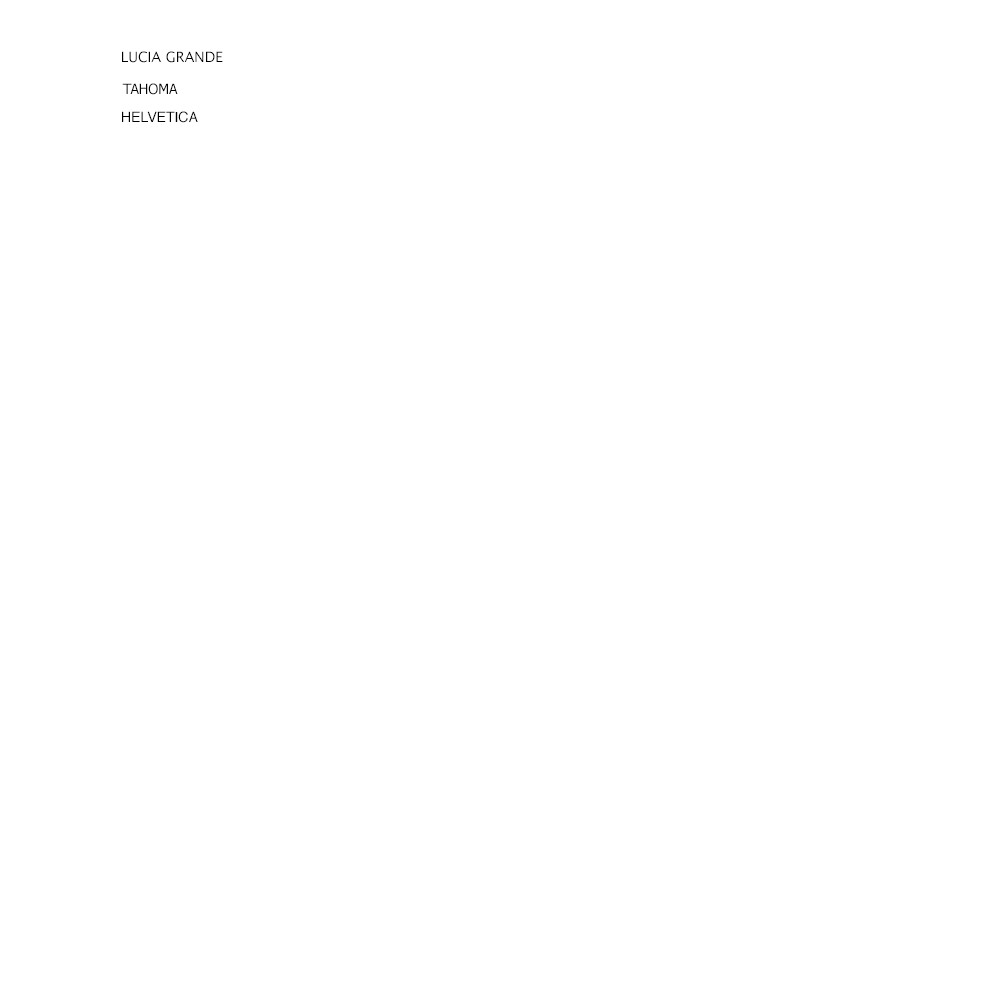
<style>
.page{position:relative;width:1000px;height:1000px;background:#ffffff}
.page>*{position:absolute;margin:0}
.t1{font:14px "LucidaGrande";color:#000000}
.t2{font:14px "Tahoma";color:#000000}
.t3{font:14px "Helvetica";color:#000000}
</style>
<div class="page">
<p class="t1" style="left:122px;top:51px;width:101px;height:12px">LUCIA GRANDE</p>
<p class="t2" style="left:122px;top:83px;width:56px;height:12px">TAHOMA</p>
<p class="t3" style="left:122px;top:111px;width:76px;height:12px">HELVETICA</p>
</div>
